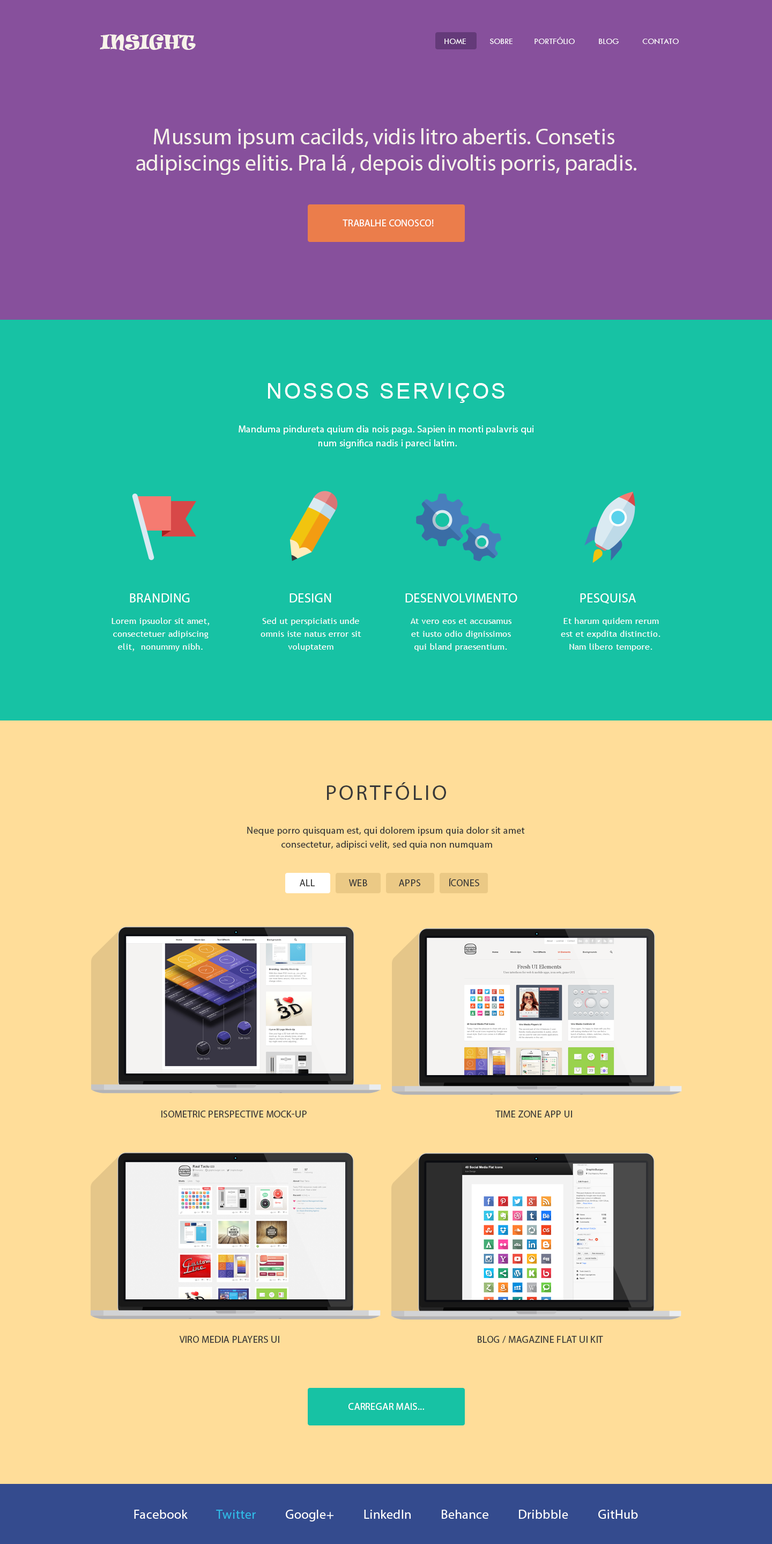
<style>
.page{position:relative;width:772px;height:1544px;background:#ffdd99}
.page>*{position:absolute;margin:0}
.t1{font:18.1px "Ravie";color:#f7f3ea}
.t2{font:8.6px "TwCenMT-Regular";color:#ffffff;text-transform:uppercase}
.t3{font:22.6px/26.2px "MyriadPro-Regular";color:#f7f3ea}
.t4{font:9.7px "MyriadPro-Regular";letter-spacing:0.02em;color:#ffffff}
.t5{font:21.5px "ArialMT";letter-spacing:0.1em;color:#ffffff}
.t6{font:9.7px/13.9px "MyriadPro-Regular";letter-spacing:0.02em;color:#ffffff}
.t7{font:12.9px "MyriadPro-Regular";letter-spacing:0.02em;color:#ffffff;text-transform:uppercase}
.t8{font:8.6px/12.9px "TrebuchetMS";letter-spacing:0.02em;color:#ffffff}
.t9{font:21.5px "MyriadPro-Regular";letter-spacing:0.1em;color:#393939}
.t10{font:9.7px/13.9px "MyriadPro-Regular";letter-spacing:0.02em;color:#393939}
.t11{font:9.7px "MyriadPro-Regular";letter-spacing:0.02em;color:#393939}
.t12{font:9.7px "MyriadPro-Regular";letter-spacing:0.02em;color:#393939;text-transform:uppercase}
.t13{font:12.9px "MyriadPro-Regular";letter-spacing:0.02em;color:#ffffff}
.t14{font:12.9px "MyriadPro-Regular";letter-spacing:0.02em;color:#30bae7}
</style>
<div class="page">
<p class="t1" style="left:100px;top:34px;width:96px;height:17px">INSIGHT</p>
<p class="t2" style="left:445px;top:37px;width:234px;height:7px">Home           SOBRE          PORTFÓLIO           Blog           ContatO</p>
<p class="t3" style="left:136px;top:128px;width:501px;height:47px;text-align:center">Mussum ipsum cacilds, vidis litro abertis. Consetis <br>adipiscings elitis. Pra lá , depois divoltis porris, paradis.</p>
<p class="t4" style="left:343px;top:219px;width:91px;height:7px">TRABALHE CONOSCO!</p>
<p class="t5" style="left:268px;top:383px;width:237px;height:20px">NOSSOS SERVIÇOS</p>
<p class="t6" style="left:239px;top:425px;width:295px;height:23px;text-align:center">Manduma pindureta quium dia nois paga. Sapien in monti palavris qui <br>num significa nadis i pareci latim.</p>
<p class="t7" style="left:130px;top:593px;width:60px;height:9px">Branding</p>
<p class="t7" style="left:290px;top:593px;width:41px;height:9px">Design</p>
<p class="t7" style="left:406px;top:593px;width:112px;height:9px">DESENVOLVIMENTO</p>
<p class="t7" style="left:580px;top:593px;width:56px;height:10px">PESQUISA</p>
<p class="t8" style="left:112px;top:617px;width:98px;height:34px;text-align:center">Lorem ipsuolor sit amet, <br>consectetuer adipiscing elit,  nonummy nibh.</p>
<p class="t8" style="left:261px;top:617px;width:101px;height:34px;text-align:center">Sed ut perspiciatis unde omnis iste natus error sit voluptatem</p>
<p class="t8" style="left:410px;top:618px;width:102px;height:33px;text-align:center">At vero eos et accusamus et iusto odio dignissimos qui bland praesentium.</p>
<p class="t8" style="left:561px;top:617px;width:100px;height:34px;text-align:center">Et harum quidem rerum est et expdita distinctio. Nam libero tempore.</p>
<p class="t9" style="left:327px;top:782px;width:119px;height:18px">PORTFÓLIO</p>
<p class="t10" style="left:247px;top:827px;width:278px;height:23px;text-align:center">Neque porro quisquam est, qui dolorem ipsum quia dolor sit amet<br> consectetur, adipisci velit, sed quia non numquam</p>
<p class="t11" style="left:300px;top:879px;width:15px;height:7px">ALL</p>
<p class="t11" style="left:349px;top:879px;width:18px;height:7px">WEB</p>
<p class="t11" style="left:399px;top:879px;width:22px;height:7px">APPS</p>
<p class="t11" style="left:450px;top:878px;width:30px;height:8px">ÍCONES</p>
<p class="t12" style="left:161px;top:1110px;width:146px;height:7px">Isometric Perspective Mock-Up</p>
<p class="t12" style="left:496px;top:1110px;width:76px;height:7px">Time Zone App UI</p>
<p class="t12" style="left:179px;top:1336px;width:100px;height:7px">Viro Media Players UI</p>
<p class="t12" style="left:478px;top:1336px;width:125px;height:7px">Blog / Magazine Flat UI Kit</p>
<p class="t4" style="left:349px;top:1403px;width:75px;height:7px">CARREGAR MAIS...</p>
<p class="t13" style="left:134px;top:1509px;width:504px;height:12px">Facebook          <span class="t14">Twitter</span>          Google+          LinkedIn          Behance          Dribbble          GitHub</p>
</div>
